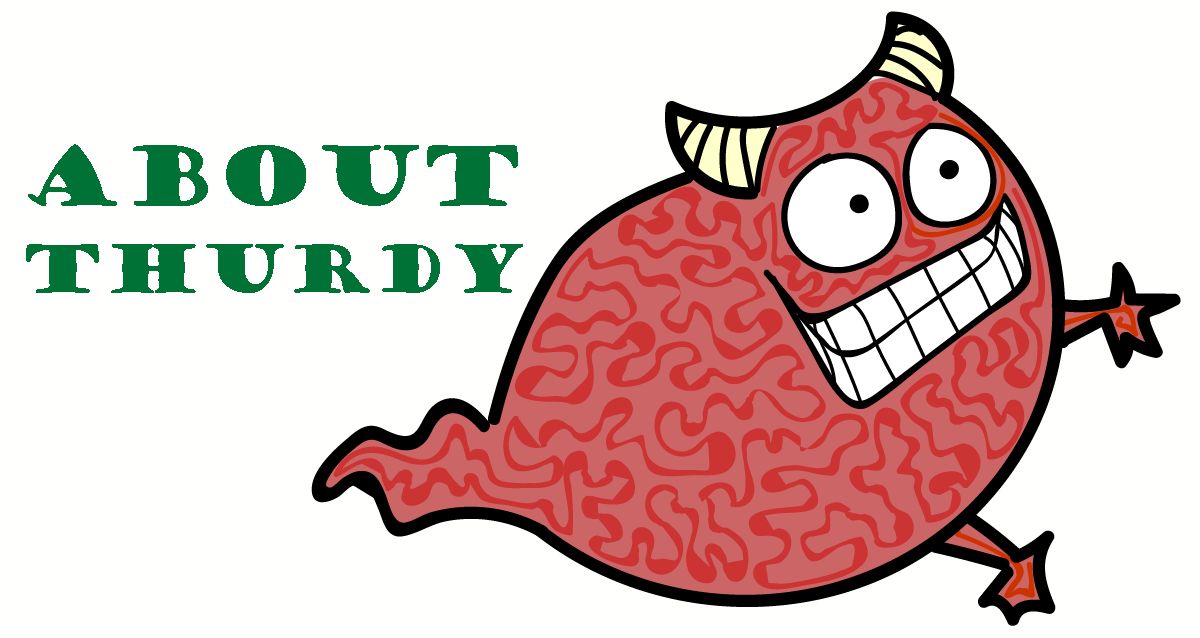
<style>
.page{position:relative;width:1200px;height:638px;background:#fffffd}
.page>*{position:absolute;margin:0}
.t1{font:80px "GoudyStout";color:#007236}
.t2{font:64px "GoudyStout";color:#007236}
</style>
<div class="page">
<p class="t1" style="left:28px;top:144px;width:490px;height:62px">ABOUT</p>
<p class="t2" style="left:26px;top:244px;width:497px;height:49px">Thurdy</p>
</div>
